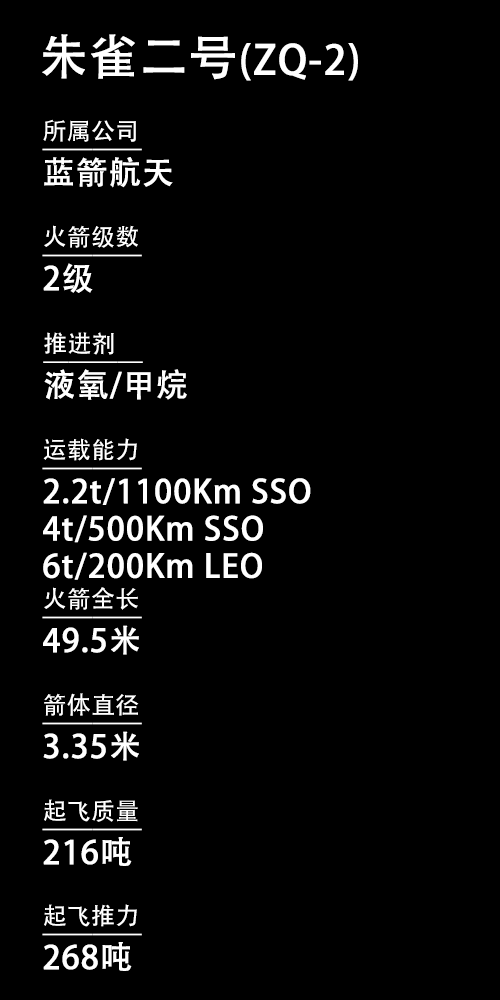
<style>
.page{position:relative;width:500px;height:1000px;background:#000000}
.page>*{position:absolute;margin:0}
.t1{font:40px "AdobeHeitiStd-Regular";letter-spacing:0.01em;color:#ffffff;font-weight:bold}
.t2{font:48px "AdobeHeitiStd-Regular";letter-spacing:0.01em;color:#ffffff;font-weight:bold}
.t3{font:24px/18.7px "AdobeHeitiStd-Regular";letter-spacing:0.01em;color:#ffffff}
.t4{font:24px/18.7px "AdobeHeitiStd-Regular";letter-spacing:0.01em;color:#ffffff;font-weight:bold}
.t5{font:32px/18.7px "AdobeHeitiStd-Regular";letter-spacing:0.01em;color:#ffffff;font-weight:bold}
</style>
<div class="page">
<p class="t1" style="left:42px;top:34px;width:316px;height:47px"><span class="t2">朱雀二号</span>(ZQ-2)</p>
<p class="t3" style="left:42px;top:119px;width:131px;height:69px">所属公司<br><span class="t4">————<br></span><span class="t5">蓝箭航天</span></p>
<p class="t3" style="left:42px;top:225px;width:100px;height:68px">火箭级数<br><span class="t4">————<br></span><span class="t5">2级</span></p>
<p class="t5" style="left:43px;top:332px;width:144px;height:68px"><span class="t3">推进剂<br></span><span class="t4">————<br></span>液氧/甲烷</p>
<p class="t5" style="left:42px;top:438px;width:269px;height:142px"><span class="t3">运载能力<br></span><span class="t4">————<br></span>2.2t/1100Km SSO<br><br>4t/500Km SSO<br><br>6t/200Km LEO</p>
<p class="t5" style="left:42px;top:587px;width:100px;height:68px"><span class="t3">火箭全长<br></span><span class="t4">————<br></span>49.5米</p>
<p class="t5" style="left:42px;top:693px;width:100px;height:68px"><span class="t3">箭体直径<br></span><span class="t4">————<br></span>3.35米</p>
<p class="t3" style="left:42px;top:799px;width:100px;height:67px">起飞质量<br><span class="t4">————<br></span><span class="t5">216吨</span></p>
<p class="t3" style="left:42px;top:904px;width:100px;height:67px">起飞推力<br><span class="t4">————<br></span><span class="t5">268吨</span></p>
</div>
